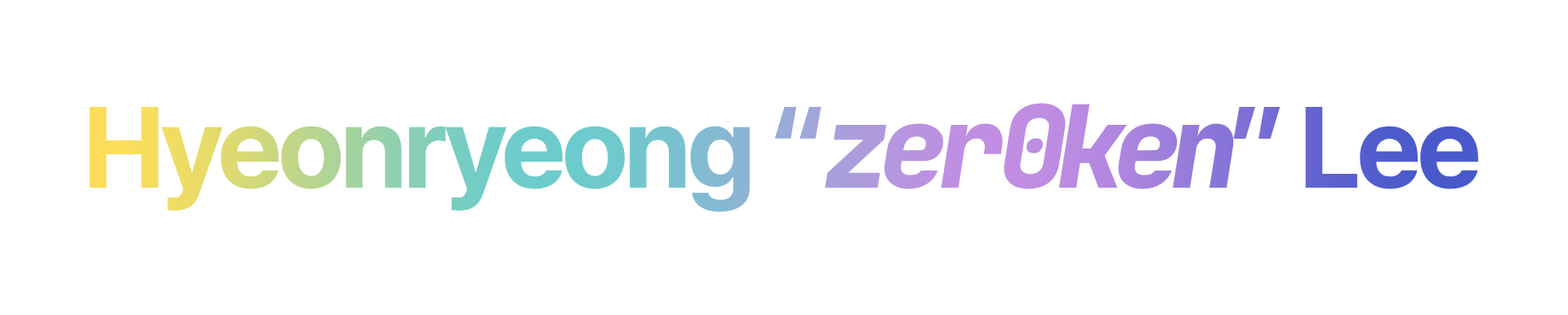
<style>
.page{position:relative;width:1568px;height:315px;background:#ffffff}
.page>*{position:absolute;margin:0}
.t1{font:114.3px "Pretendard-Bold";letter-spacing:-0.046em}
.t2{font:114.3px "JetBrainsMonoNL-ExtraBoldItalic";letter-spacing:-0.1em}
.t3{font:114.3px "JetBrainsMonoNL-ExtraBoldItalic";letter-spacing:-0.054em}
</style>
<div class="page">
<p class="t1" style="left:89px;top:103px;width:1389px;height:109px">Hyeonryeong “<span class="t2">ze</span><span class="t3">r</span><span class="t2">0ken</span>” Lee</p>
</div>
